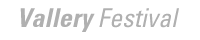
<style>
.page{position:relative;width:200px;height:40px;background:#ffffff}
.page>*{position:absolute;margin:0}
.t1{font:26px "Univeconobl";color:#b0b0b0}
.t2{font:26px "Univeconbolobl";color:#b0b0b0}
</style>
<div class="page">
<p class="t1" style="left:20px;top:8px;width:159px;height:24px"><span class="t2">Vallery</span> Festival</p>
</div>
